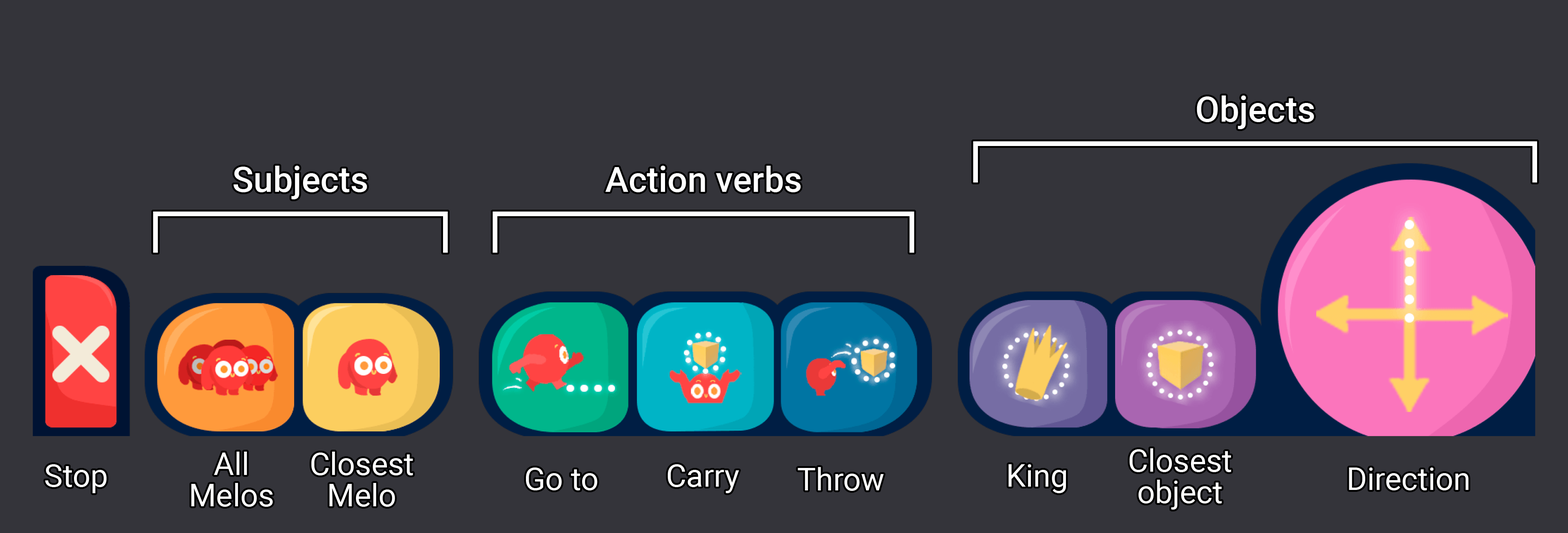
<style>
.page{position:relative;width:1568px;height:533px;background:#34343a}
.page>*{position:absolute;margin:0}
.t1{font:35.1px "Roboto-Medium";color:#ffffff}
.t2{font:31.2px/31.2px "Roboto-Regular";color:#ffffff}
.t3{font:31.2px "Roboto-Regular";color:#ffffff}
</style>
<div class="page">
<p class="t1" style="left:1197px;top:96px;width:117px;height:33px">Objects</p>
<p class="t1" style="left:233px;top:166px;width:134px;height:34px">Subjects</p>
<p class="t1" style="left:605px;top:166px;width:196px;height:26px">Action verbs</p>
<p class="t2" style="left:1129px;top:449px;width:102px;height:61px;text-align:center">Closest<br>object</p>
<p class="t2" style="left:191px;top:452px;width:82px;height:55px;text-align:center">All<br>Melos</p>
<p class="t2" style="left:311px;top:452px;width:102px;height:55px;text-align:center">Closest<br>Melo</p>
<p class="t3" style="left:45px;top:465px;width:62px;height:29px">Stop</p>
<p class="t3" style="left:526px;top:468px;width:72px;height:23px">Go to</p>
<p class="t3" style="left:667px;top:465px;width:72px;height:29px">Carry</p>
<p class="t3" style="left:798px;top:467px;width:86px;height:24px">Throw</p>
<p class="t3" style="left:1008px;top:465px;width:58px;height:29px">King</p>
<p class="t3" style="left:1349px;top:468px;width:120px;height:23px">Direction</p>
</div>
